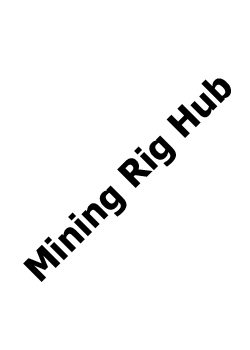
<style>
.page{position:relative;width:250px;height:350px;background:#ffffff}
.page>*{position:absolute;margin:0}
.t1{font:36px "Tahoma-Bold";color:#000000}
</style>
<div class="page">
<p class="t1" style="left:23px;top:78px;width:208px;height:204px;rotate:-45deg">Mining Rig Hub</p>
</div>
